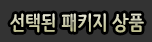
<style>
.page{position:relative;width:152px;height:42px;background:#333333}
.page>*{position:absolute;margin:0}
.t1{font:20px "NanumBarunpen-Bold"}
</style>
<div class="page">
<p class="t1" style="left:10px;top:13px;width:134px;height:20px">선택된 패키지 상품</p>
</div>
